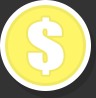
<style>
.page{position:relative;width:96px;height:98px;background:#fff568}
.page>*{position:absolute;margin:0}
.t1{font:61.2px "Impact";letter-spacing:-0.005em;color:#ffffff;scale:1.18 1}
</style>
<div class="page">
<p class="t1" style="left:28px;top:17px;width:36px;height:58px">$</p>
</div>
